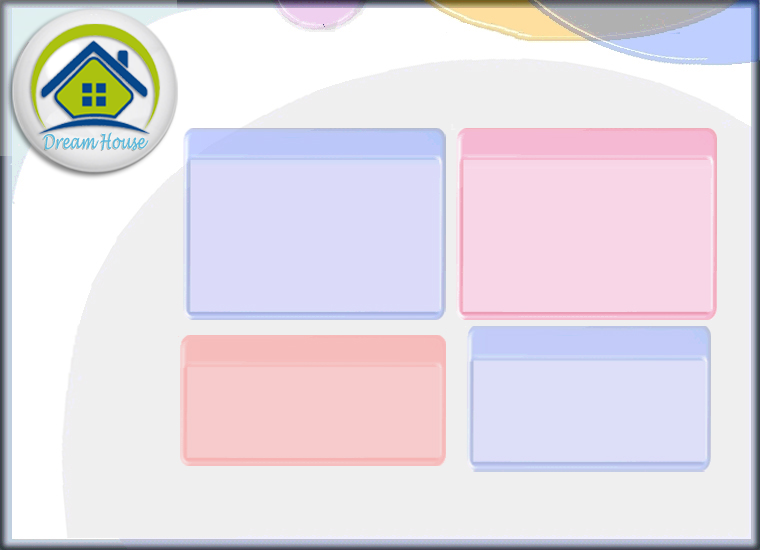
<style>
.page{position:relative;width:760px;height:550px;background:#efefef}
.page>*{position:absolute;margin:0}
.t1{font:19.5px "LucidaHandwriting-Italic";color:#5db7dc;scale:0.7 1}
</style>
<div class="page">
<p class="t1" style="left:43px;top:132px;width:106px;height:19px">Dream House</p>
</div>
